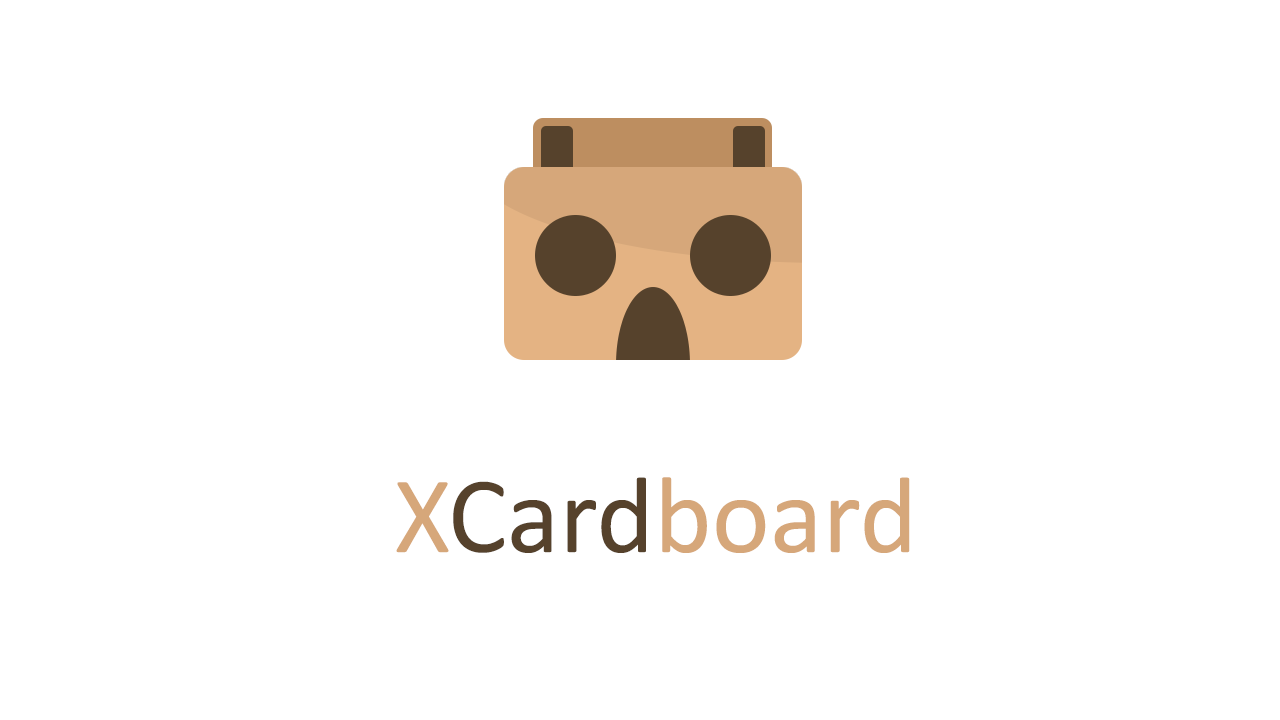
<style>
.page{position:relative;width:1280px;height:720px;background:#ffffff}
.page>*{position:absolute;margin:0}
.t1{font:110px "Calibri";color:#d6a77a}
.t2{font:110px "Calibri";color:#56422c}
</style>
<div class="page">
<p class="t1" style="left:396px;top:477px;width:514px;height:76px">X<span class="t2">Card</span>board</p>
</div>
